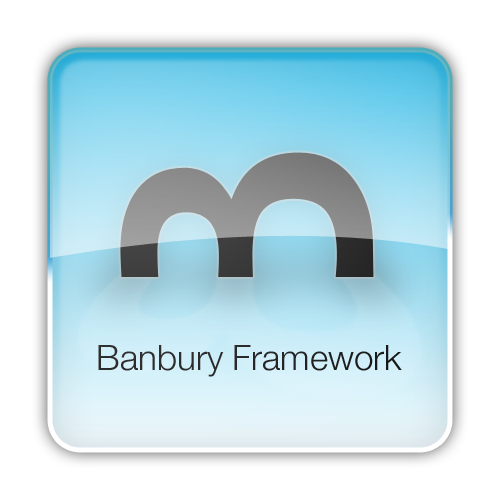
<style>
.page{position:relative;width:500px;height:500px;background:#ffffff}
.page>*{position:absolute;margin:0}
.t1{font:35px "HelveticaNeue-Light";color:#2a2a2a}
</style>
<div class="page">
<p class="t1" style="left:98px;top:345px;width:304px;height:32px">Banbury Framework</p>
</div>
